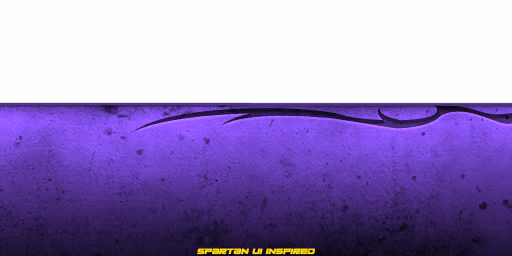
<style>
.page{position:relative;width:512px;height:256px;background:#fefefe}
.page>*{position:absolute;margin:0}
.t1{font:10px "NeonAI-Italic";color:#ffdb0d}
</style>
<div class="page">
<p class="t1" style="left:197px;top:248px;width:118px;height:7px">Spartan UI inspired</p>
</div>
